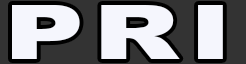
<style>
.page{position:relative;width:246px;height:64px;background:#f5f6fd}
.page>*{position:absolute;margin:0}
.t1{font:75.2px "Arial-Black";letter-spacing:0.08em;color:#f5f6fd;scale:1.48 1}
</style>
<div class="page">
<p class="t1" style="left:12px;top:5px;width:211px;height:54px">PRI</p>
</div>
